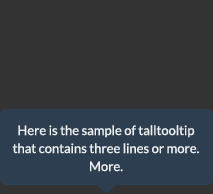
<style>
.page{position:relative;width:213px;height:194px;background:#333333}
.page>*{position:absolute;margin:0}
.t1{font:13px/18px "Lato-Regular";color:#ecf0f1}
</style>
<div class="page">
<p class="t1" style="left:12px;top:125px;width:187px;height:47px;text-align:center">Here is the sample of talltooltip that contains three lines or more. More.</p>
</div>
